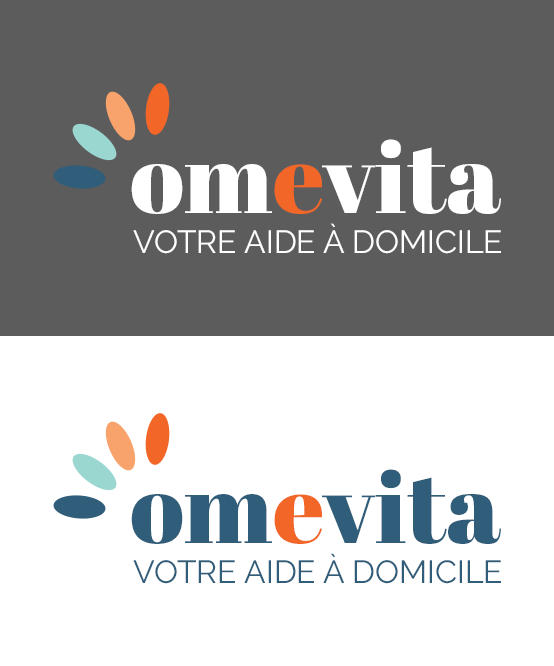
<style>
.page{position:relative;width:554px;height:666px;background:#ffffff}
.page>*{position:absolute;margin:0}
.t1{font:100px "AbrilFatface-Regular";color:#ffffff}
.t2{font:100px "AbrilFatface-Regular";color:#f26628}
.t3{font:32px "Raleway-Regular";color:#ffffff;text-transform:uppercase}
.t4{font:100px "AbrilFatface-Regular";color:#305d7a}
.t5{font:32px "Raleway-Regular";color:#305d7a;text-transform:uppercase}
</style>
<div class="page">
<p class="t1" style="left:131px;top:139px;width:370px;height:75px">om<span class="t2">e</span>vita</p>
<p class="t3" style="left:133px;top:223px;width:368px;height:31px">Votre aide à domicile</p>
<p class="t4" style="left:131px;top:469px;width:370px;height:75px">om<span class="t2">e</span>vita</p>
<p class="t5" style="left:133px;top:553px;width:368px;height:31px">Votre aide à domicile</p>
</div>
